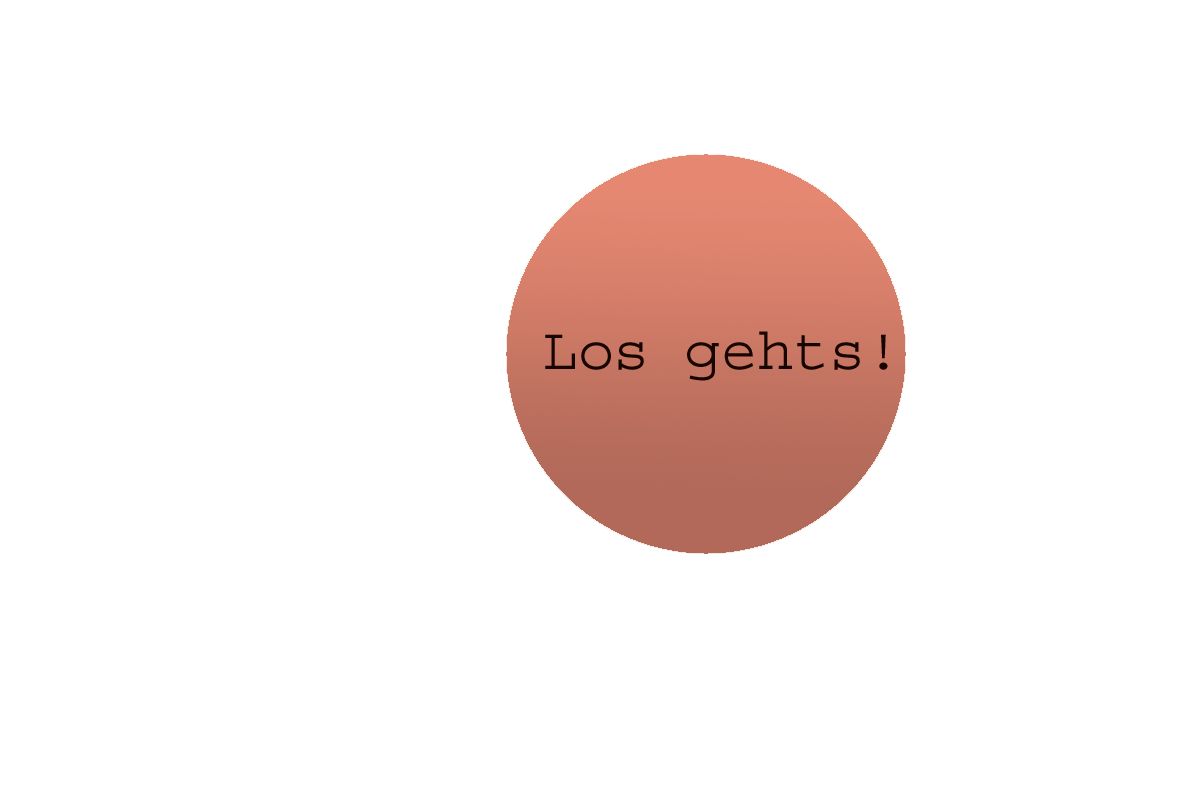
<style>
.page{position:relative;width:1200px;height:800px;background:#ffffff}
.page>*{position:absolute;margin:0}
.t1{font:59.8px "Courier";color:#170500}
</style>
<div class="page">
<p class="t1" style="left:545px;top:331px;width:343px;height:50px">Los gehts!</p>
</div>
